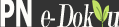
<style>
.page{position:relative;width:119px;height:27px;background:#333333}
.page>*{position:absolute;margin:0}
.t1{font:38.1px "Tahoma-Bold";color:#fefdfa;scale:0.64 1}
.t2{font:34.9px "Modern-Regular";color:#fcfbf7;font-style:italic;scale:0.61 1}
.t3{font:38.1px "Modern-Regular";color:#fcfbf7;font-style:italic;scale:0.61 1}
.t4{font:35.3px "Modern-Regular";color:#fcfbf7;font-style:italic;scale:0.78 1}
</style>
<div class="page">
<p class="t1" style="left:0px;top:0px;width:32px;height:27px">PN</p>
<p class="t2" style="left:41px;top:4px;width:54px;height:24px"><span class="t3">e</span>-Dok</p>
<p class="t4" style="left:107px;top:11px;width:13px;height:16px">u</p>
</div>
